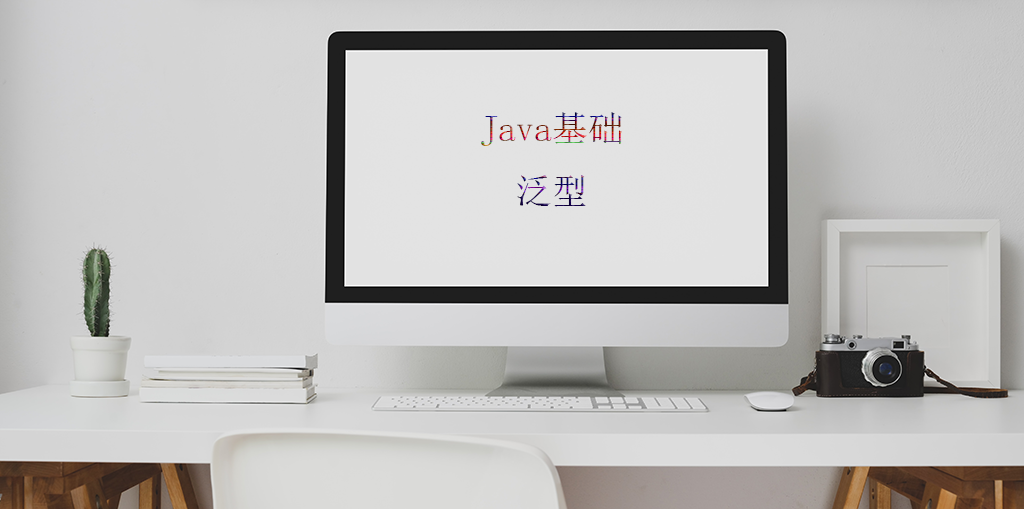
<style>
.page{position:relative;width:1024px;height:509px}
.page>*{position:absolute;margin:0}
.t1{font:36px "SimSun"}
</style>
<div class="page">
<p class="t1" style="left:481px;top:112px;width:141px;height:95px;text-align:center">Java基础<br>泛型</p>
</div>
